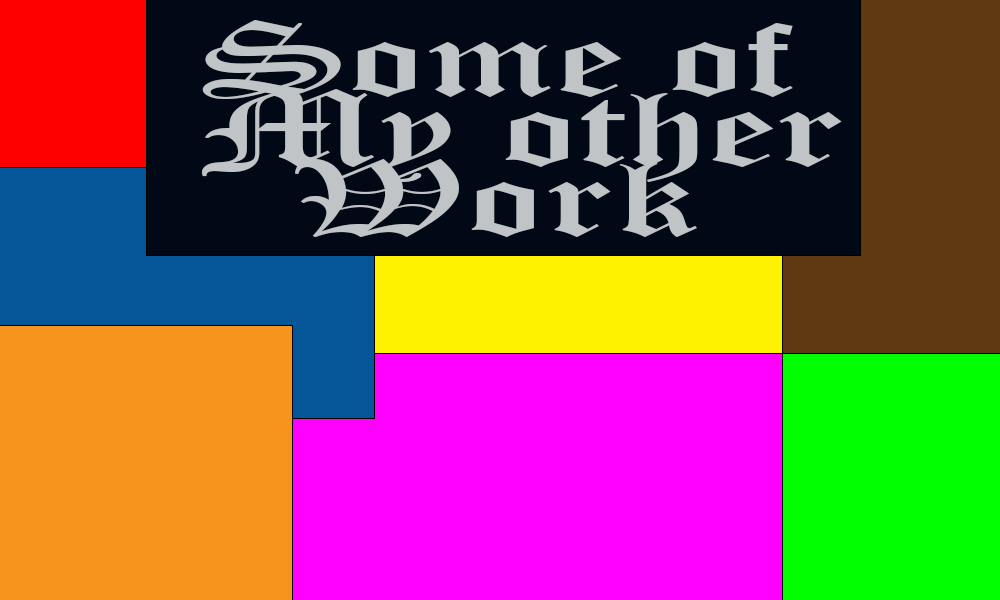
<style>
.page{position:relative;width:1000px;height:600px;background:#010816}
.page>*{position:absolute;margin:0}
.t1{font:105px "OldEnglishTextMT";color:#c1c4c7;scale:1.67 1}
</style>
<div class="page">
<p class="t1" style="left:201px;top:20px;width:641px;height:217px">Some of<br>My other<br>  Work</p>
</div>
